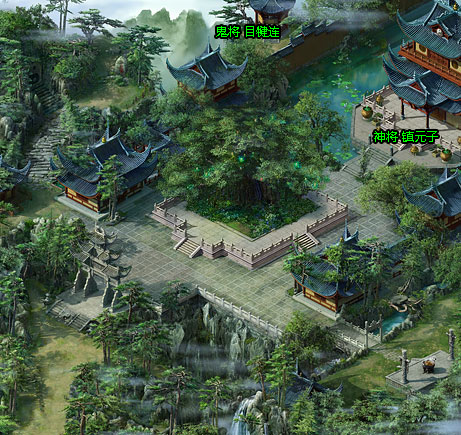
<style>
.page{position:relative;width:461px;height:435px}
.page>*{position:absolute;margin:0}
.t1{font:12px "MicrosoftYaHei";color:#00ff00}
</style>
<div class="page">
<p class="t1" style="left:216px;top:26px;width:63px;height:11px">鬼将 目犍连</p>
<p class="t1" style="left:374px;top:131px;width:64px;height:11px">神将 镇元子</p>
</div>
